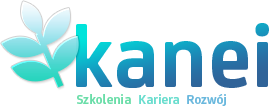
<style>
.page{position:relative;width:269px;height:106px;background:#ffffff}
.page>*{position:absolute;margin:0}
.t1{font:92.5px "FSJoey-Bold"}
.t2{font:14px "FSJoey-Bold";color:#6adda8}
.t3{font:14px "FSJoey-Bold";color:#6addce}
.t4{font:14px "FSJoey-Bold";color:#6ab8dd}
</style>
<div class="page">
<p class="t1" style="left:76px;top:23px;width:193px;height:65px">kanei</p>
<p class="t2" style="left:77px;top:94px;width:54px;height:10px">Szkolenia</p>
<p class="t3" style="left:139px;top:94px;width:40px;height:10px">Kariera</p>
<p class="t4" style="left:187px;top:94px;width:39px;height:12px">Rozwój</p>
</div>
